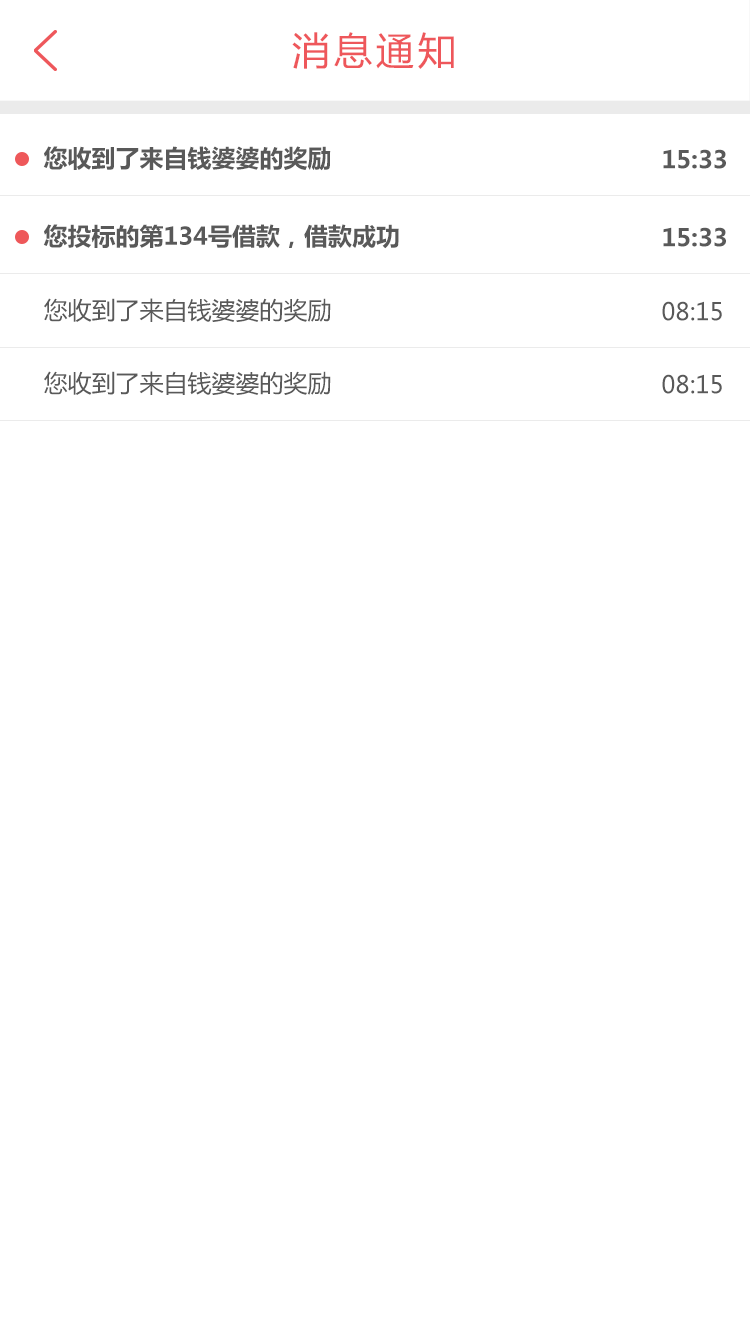
<style>
.page{position:relative;width:750px;height:1334px;background:#ffffff}
.page>*{position:absolute;margin:0}
.t1{font:38px "MicrosoftYaHei";letter-spacing:0.1em;color:#ee575b}
.t2{font:24px "MicrosoftYaHei-Bold";color:#595959}
.t3{font:24px "MicrosoftYaHei";color:#595959}
</style>
<div class="page">
<p class="t1" style="left:292px;top:32px;width:162px;height:37px">消息通知</p>
<p class="t2" style="left:43px;top:146px;width:288px;height:25px">您收到了来自钱婆婆的奖励</p>
<p class="t2" style="left:663px;top:149px;width:63px;height:20px">15:33</p>
<p class="t2" style="left:43px;top:224px;width:356px;height:25px">您投标的第134号借款，借款成功</p>
<p class="t2" style="left:663px;top:227px;width:63px;height:20px">15:33</p>
<p class="t3" style="left:44px;top:298px;width:287px;height:24px">您收到了来自钱婆婆的奖励</p>
<p class="t3" style="left:662px;top:301px;width:60px;height:20px">08:15</p>
<p class="t3" style="left:44px;top:371px;width:287px;height:24px">您收到了来自钱婆婆的奖励</p>
<p class="t3" style="left:662px;top:374px;width:60px;height:20px">08:15</p>
</div>
